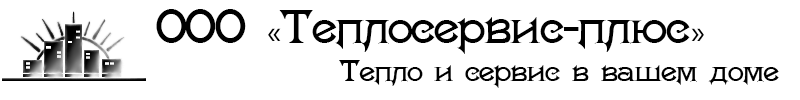
<style>
.page{position:relative;width:800px;height:100px;background:#ffffff}
.page>*{position:absolute;margin:0}
.t1{font:33.3px "Washington";color:#000000}
.t2{font:33.3px "MyriadPro-Regular";color:#000000}
.t3{font:20.8px "Washington";color:#000000}
</style>
<div class="page">
<p class="t1" style="left:156px;top:9px;width:548px;height:45px">ООО <span class="t2">«</span>Теплосервис-плюс<span class="t2">»</span></p>
<p class="t3" style="left:339px;top:60px;width:440px;height:28px">Тепло и сервис в вашем доме</p>
</div>
